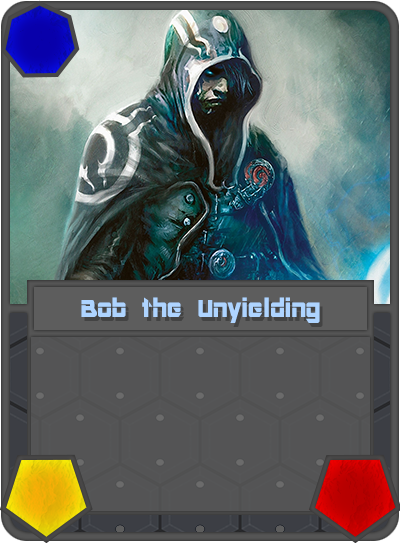
<style>
.page{position:relative;width:400px;height:543px}
.page>*{position:absolute;margin:0}
.t1{font:27px "ARDESTINE";color:#aed4ff}
</style>
<div class="page">
<p class="t1" style="left:81px;top:297px;width:239px;height:26px">Bob the Unyielding</p>
</div>
